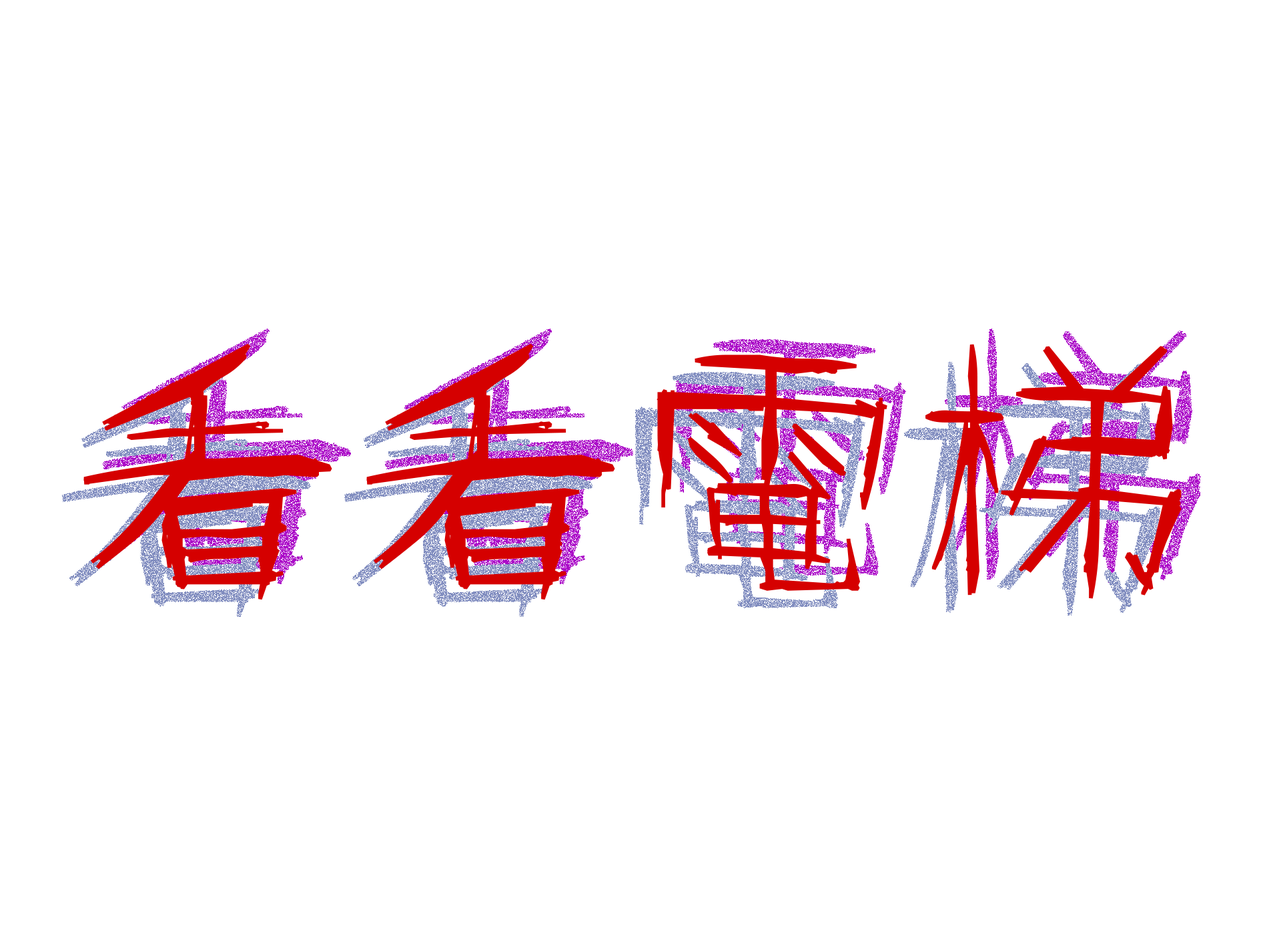
<style>
.page{position:relative;width:1261px;height:946px;background:#ffffff}
.page>*{position:absolute;margin:0}
.t1{font:259.7px "onryou";letter-spacing:0.04em;font-weight:bold}
.t2{font:259.7px "onryou";letter-spacing:0.04em;color:#d50000;font-weight:bold}
.t3{font:259.7px "onryou";letter-spacing:0.04em;color:#010101;font-weight:bold}
</style>
<div class="page">
<p class="t1" style="left:103px;top:328px;width:1098px;height:257px">看看電梯吧</p>
<p class="t2" style="left:83px;top:343px;width:1099px;height:257px">看看電梯<span class="t3">吧</span></p>
<p class="t1" style="left:62px;top:360px;width:1098px;height:257px">看看電梯吧</p>
</div>
